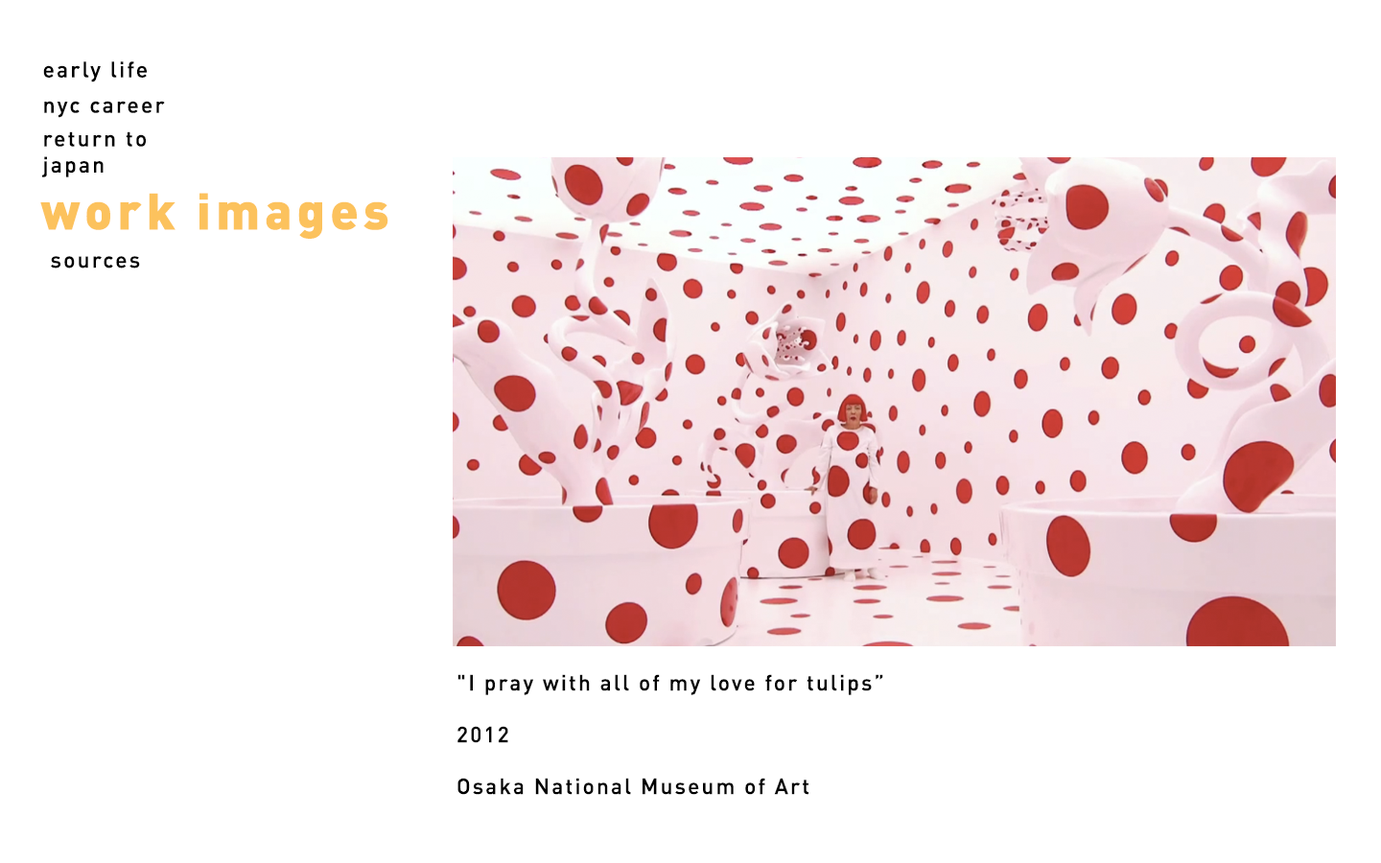
<style>
.page{position:relative;width:1381px;height:863px;background:#ffffff}
.page>*{position:absolute;margin:0}
.t1{font:21.8px "DIN-Medium";letter-spacing:0.1em;color:#000000}
.t2{font:50.4px "DIN-Black";letter-spacing:0.1em;color:#fcc25d}
.t3{font:21.6px "DIN-Medium";letter-spacing:0.1em;color:#000000}
</style>
<div class="page">
<p class="t1" style="left:43px;top:61px;width:104px;height:21px">early life</p>
<p class="t1" style="left:44px;top:101px;width:121px;height:17px">nyc career</p>
<p class="t1" style="left:42px;top:131px;width:104px;height:46px">return to japan</p>
<p class="t2" style="left:40px;top:193px;width:348px;height:46px">work images</p>
<p class="t1" style="left:51px;top:256px;width:89px;height:13px">sources</p>
<p class="t3" style="left:458px;top:674px;width:425px;height:121px">"I pray with all of my love for tulips”<br><br>2012<br><br>Osaka National Museum of Art<br><br>Installation</p>
</div>
